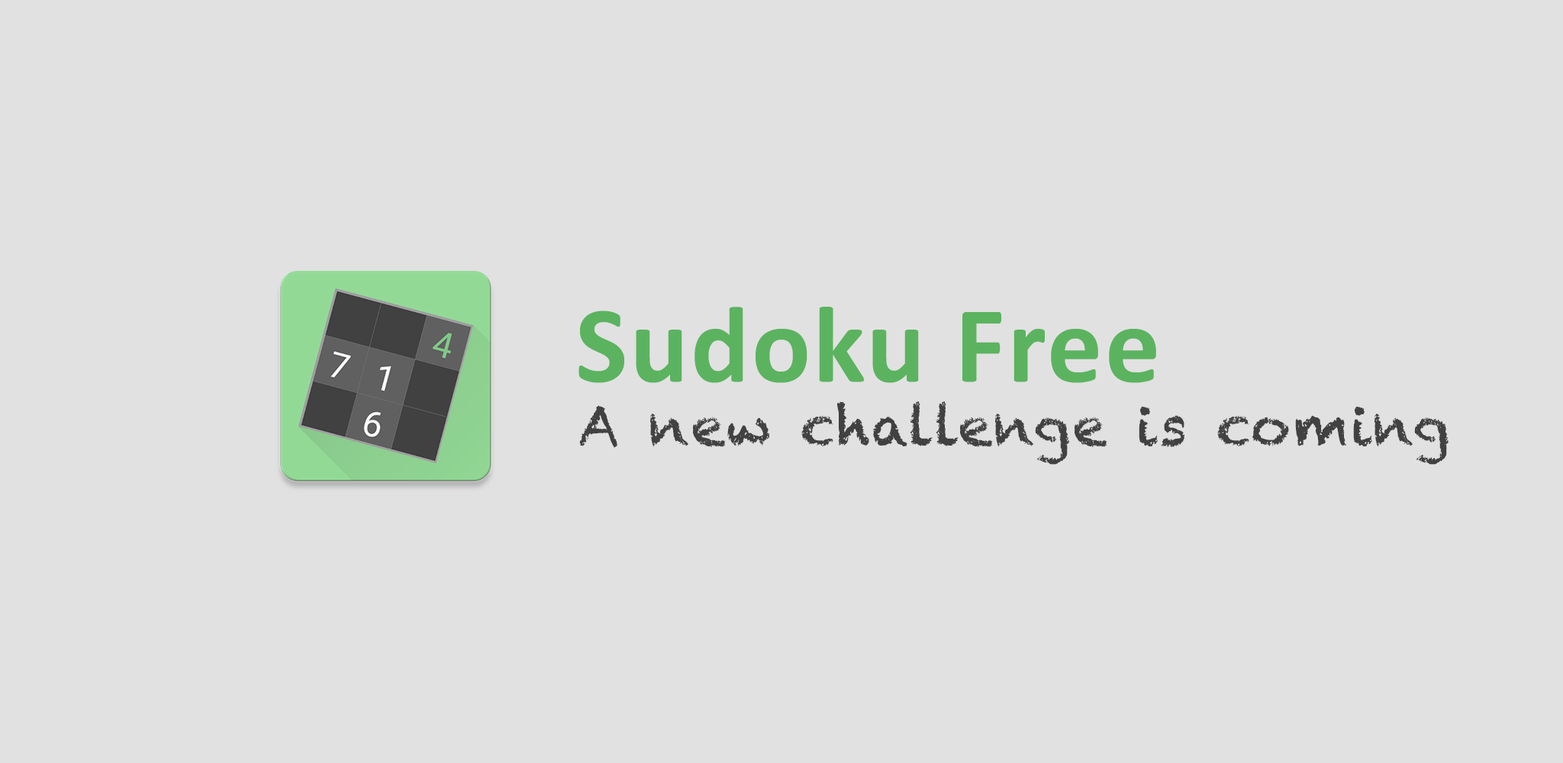
<style>
.page{position:relative;width:1563px;height:763px;background:#e1e1e1}
.page>*{position:absolute;margin:0}
.t1{font:109.9px "Calibri-Bold";letter-spacing:0.02em;color:#5bb35f}
.t2{font:54.9px "Chalkduster";letter-spacing:0.02em;color:#414141}
</style>
<div class="page">
<p class="t1" style="left:578px;top:307px;width:578px;height:76px">Sudoku Free</p>
<p class="t2" style="left:579px;top:401px;width:869px;height:64px">A new challenge is coming</p>
</div>
